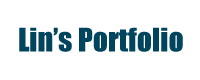
<style>
.page{position:relative;width:200px;height:80px;background:#ffffff}
.page>*{position:absolute;margin:0}
.t1{font:30px "Impact";color:#00445d}
</style>
<div class="page">
<p class="t1" style="left:19px;top:27px;width:164px;height:25px">Lin’s Portfolio</p>
</div>
